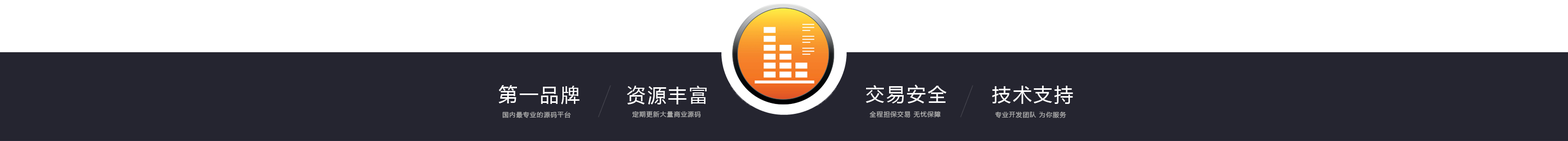
<style>
.page{position:relative;width:1568px;height:141px;background:#252530}
.page>*{position:absolute;margin:0}
.t1{font:18.8px "MicrosoftYaHei";letter-spacing:0.1em;color:#ffffff}
.t2{font:6.3px "MicrosoftYaHei";letter-spacing:0.1em;color:#b5b5b5}
</style>
<div class="page">
<p class="t1" style="left:499px;top:85px;width:81px;height:20px">第一品牌</p>
<p class="t1" style="left:627px;top:86px;width:80px;height:19px">资源丰富</p>
<p class="t1" style="left:866px;top:85px;width:81px;height:18px">交易安全</p>
<p class="t1" style="left:992px;top:86px;width:81px;height:18px">技术支持</p>
<p class="t2" style="left:502px;top:111px;width:69px;height:7px">国内最专业的源码平台</p>
<p class="t2" style="left:632px;top:111px;width:69px;height:7px">定期更新大量商业源码</p>
<p class="t2" style="left:870px;top:111px;width:71px;height:7px">全程担保交易 无忧保障</p>
<p class="t2" style="left:995px;top:111px;width:71px;height:7px">专业开发团队 为你服务</p>
</div>
